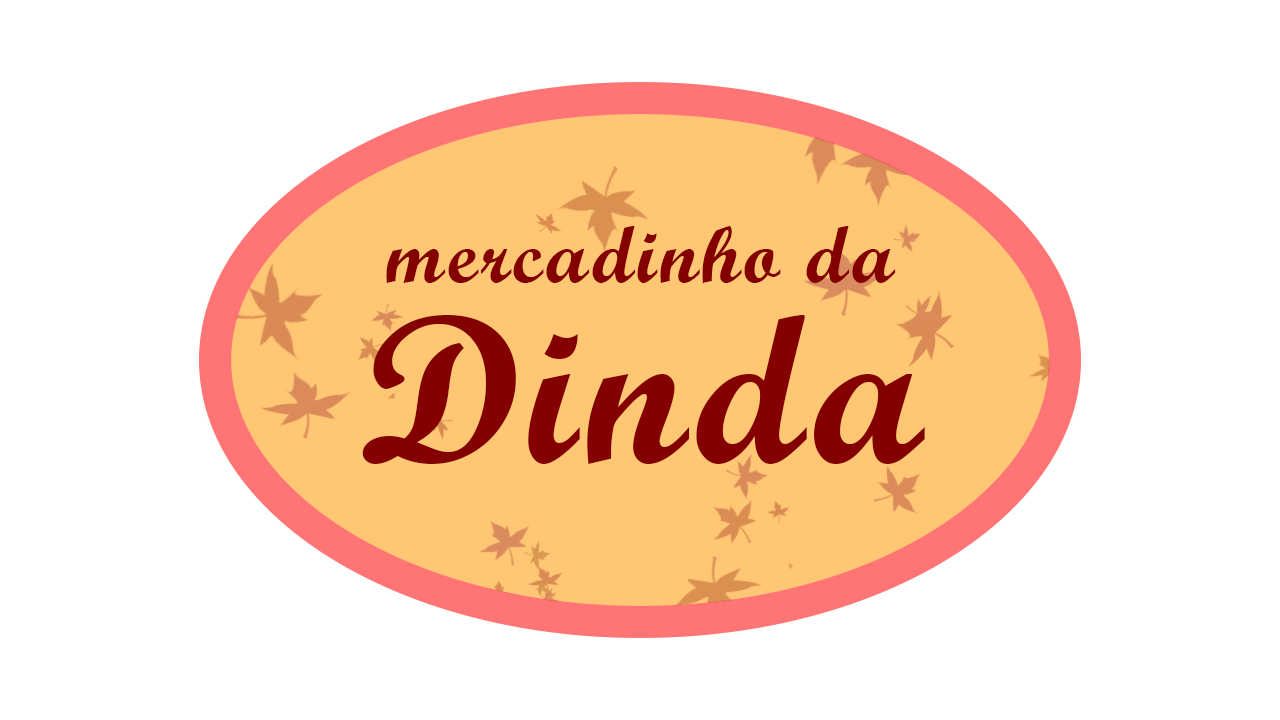
<style>
.page{position:relative;width:1280px;height:720px;background:#ffffff}
.page>*{position:absolute;margin:0}
.t1{font:79.9px "ScriptMTBold";letter-spacing:0.041em;color:#840000}
.t2{font:210.1px "ScriptMTBold";letter-spacing:0.041em;color:#840000}
</style>
<div class="page">
<p class="t1" style="left:386px;top:226px;width:510px;height:57px">mercadinho da</p>
<p class="t2" style="left:362px;top:314px;width:563px;height:150px">Dinda</p>
</div>
